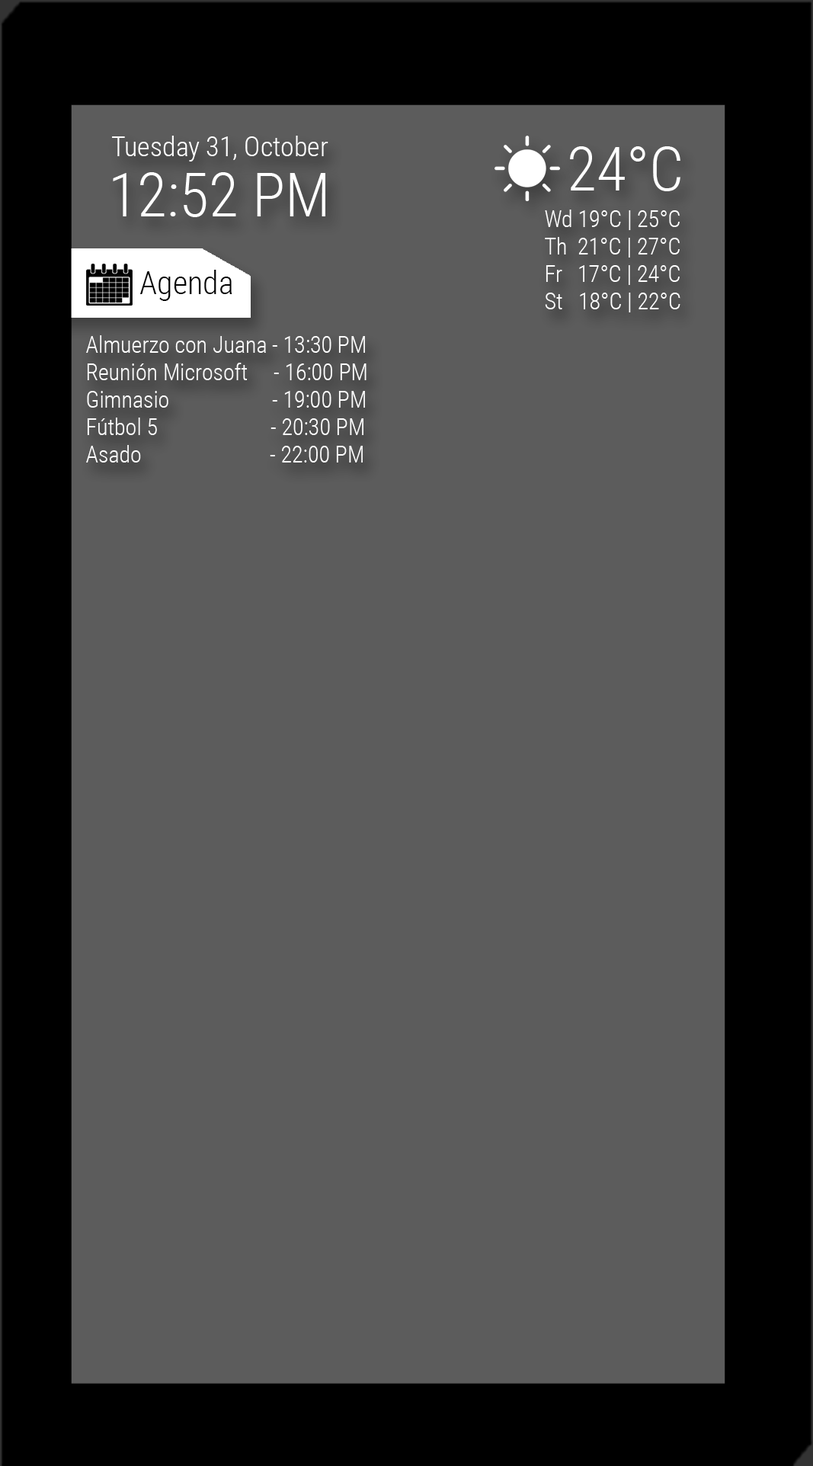
<style>
.page{position:relative;width:813px;height:1466px;background:#5c5c5c}
.page>*{position:absolute;margin:0}
.t1{font:27.5px "RobotoCondensed-Light";color:#ffffff}
.t2{font:61px "RobotoCondensed-Light";color:#ffffff}
.t3{font:22.9px "RobotoCondensed-Light";color:#ffffff}
.t4{font:32px "RobotoCondensed-Light";color:#000000}
</style>
<div class="page">
<p class="t1" style="left:112px;top:136px;width:216px;height:26px">Tuesday 31, October</p>
<p class="t2" style="left:570px;top:146px;width:111px;height:45px">24°C</p>
<p class="t2" style="left:113px;top:172px;width:212px;height:45px">12:52 PM</p>
<p class="t3" style="left:545px;top:210px;width:136px;height:102px">Wd 19°C | 25°C<br>Th  21°C  | 27°C<br>Fr   17°C  | 24°C<br>St   18°C | 22°C</p>
<p class="t4" style="left:139px;top:270px;width:93px;height:31px">Agenda</p>
<p class="t3" style="left:86px;top:335px;width:281px;height:128px">Almuerzo con Juana - 13:30 PM<br>Reunión Microsoft     - 16:00 PM<br>Gimnasio                    - 19:00 PM<br>Fútbol 5                      - 20:30 PM<br>Asado                         - 22:00 PM</p>
</div>
